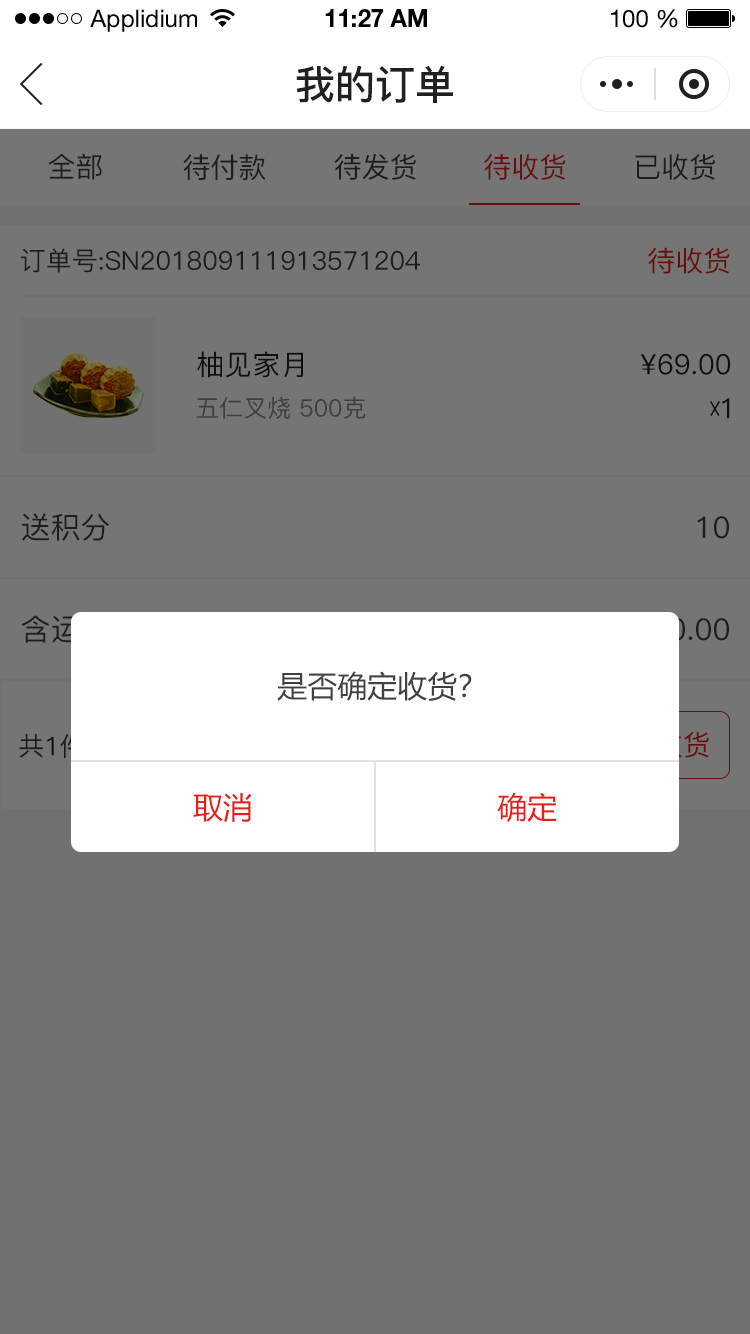
<style>
.page{position:relative;width:750px;height:1334px;background:#717171}
.page>*{position:absolute;margin:0}
.t1{font:24px "HelveticaNeueLTStd-Roman";color:#000000}
.t2{font:24px "HelveticaNeueLTStd-Bd";color:#000000}
.t3{font:40px "PingFang-SC-Bold";color:#202020;text-transform:uppercase}
.t4{font:28px "PingFang-SC-Medium";color:#1d1d1d;text-transform:uppercase}
.t5{font:28px "PingFang-SC-Medium";color:#6a0e0b;text-transform:uppercase}
.t6{font:26px "PingFang-SC-Medium";color:#1d1d1d;text-transform:uppercase}
.t7{font:28px "PingFang-SC-Medium";color:#202020;text-transform:uppercase}
.t8{font:24px "PingFang-SC-Medium";color:#3e3e3e;text-transform:uppercase}
.t9{font:30px "PingFang-SC-Medium";color:#1d1d1d;text-transform:uppercase}
.t10{font:30px "MicrosoftYaHei";color:#404040;text-transform:uppercase}
.t11{font:30px "MicrosoftYaHei";color:#e61f18;text-transform:uppercase}
</style>
<div class="page">
<p class="t1" style="left:90px;top:9px;width:107px;height:23px">Applidium</p>
<p class="t2" style="left:325px;top:9px;width:102px;height:18px">11:27 AM</p>
<p class="t1" style="left:611px;top:9px;width:67px;height:19px">100 %</p>
<p class="t3" style="left:296px;top:65px;width:157px;height:38px">我的订单</p>
<p class="t4" style="left:48px;top:153px;width:54px;height:27px">全部</p>
<p class="t4" style="left:183px;top:154px;width:83px;height:26px">待付款</p>
<p class="t4" style="left:334px;top:154px;width:82px;height:26px">待发货</p>
<p class="t5" style="left:484px;top:154px;width:82px;height:26px">待收货</p>
<p class="t4" style="left:635px;top:154px;width:80px;height:26px">已收货</p>
<p class="t6" style="left:21px;top:248px;width:399px;height:25px">订单号:sn201809111913571204</p>
<p class="t5" style="left:648px;top:247px;width:82px;height:27px">待收货</p>
<p class="t7" style="left:197px;top:351px;width:106px;height:27px">柚见家月</p>
<p class="t7" style="left:640px;top:353px;width:91px;height:22px">¥69.00</p>
<p class="t8" style="left:196px;top:396px;width:170px;height:23px">五仁叉烧 500克</p>
<p class="t7" style="left:722px;top:398px;width:8px;height:21px">1</p>
<p class="t9" style="left:22px;top:513px;width:87px;height:28px">送积分</p>
<p class="t9" style="left:697px;top:516px;width:32px;height:23px">10</p>
<p class="t10" style="left:277px;top:671px;width:195px;height:30px">是否确定收货？</p>
<p class="t11" style="left:193px;top:793px;width:59px;height:29px">取消</p>
<p class="t11" style="left:497px;top:792px;width:60px;height:30px">确定</p>
</div>
